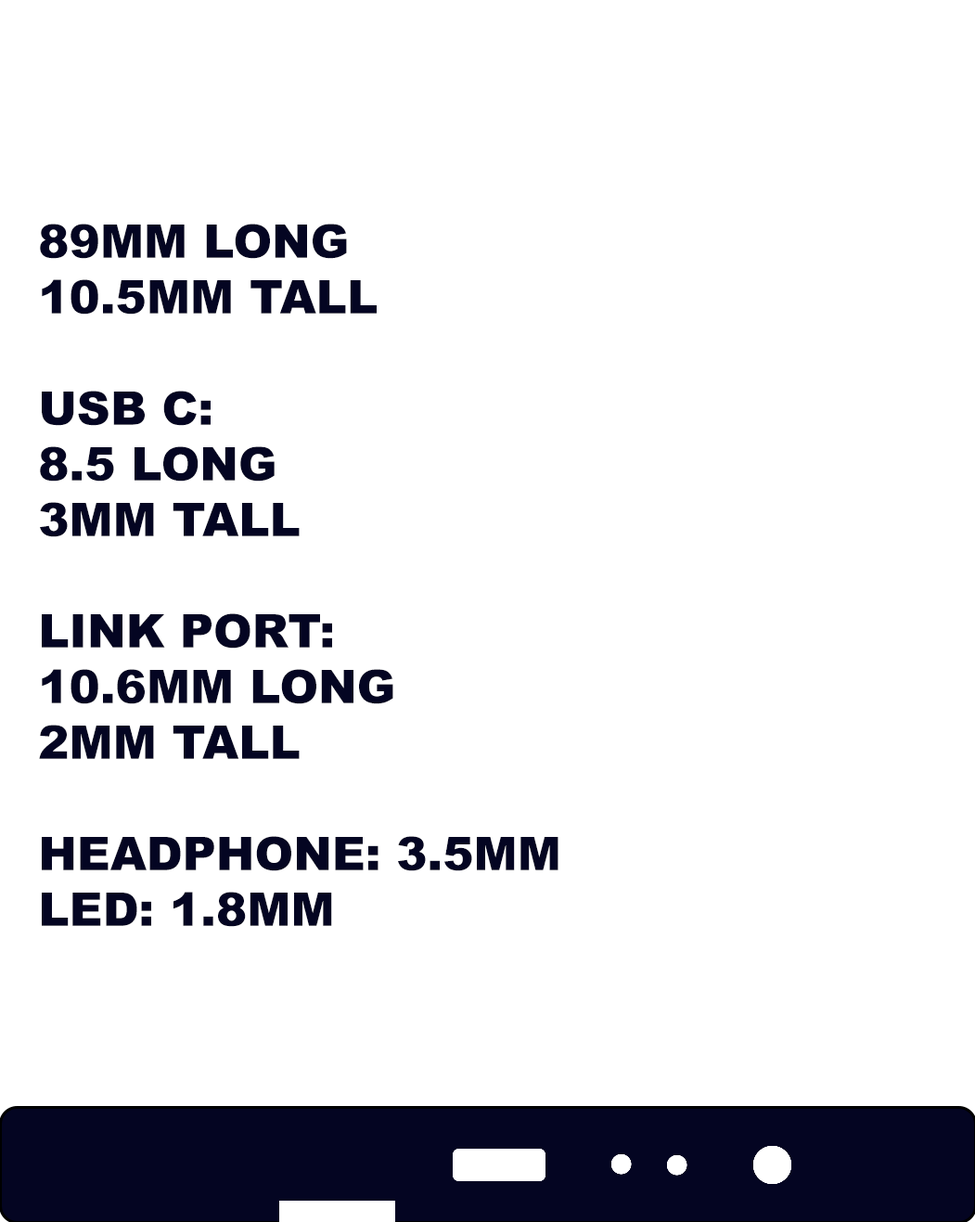
<style>
.page{position:relative;width:975px;height:1222px;background:#ffffff}
.page>*{position:absolute;margin:0}
.t1{font:46.4px "Arial-Black";color:#040522;text-transform:uppercase}
</style>
<div class="page">
<p class="t1" style="left:39px;top:224px;width:520px;height:703px">89mm long<br>10.5mm tall<br><br>Usb c: <br>8.5 long<br>3mm tall<br><br>Link port:<br>10.6mm long<br>2mm tall<br><br>Headphone: 3.5mm<br>led: 1.8mm</p>
</div>
